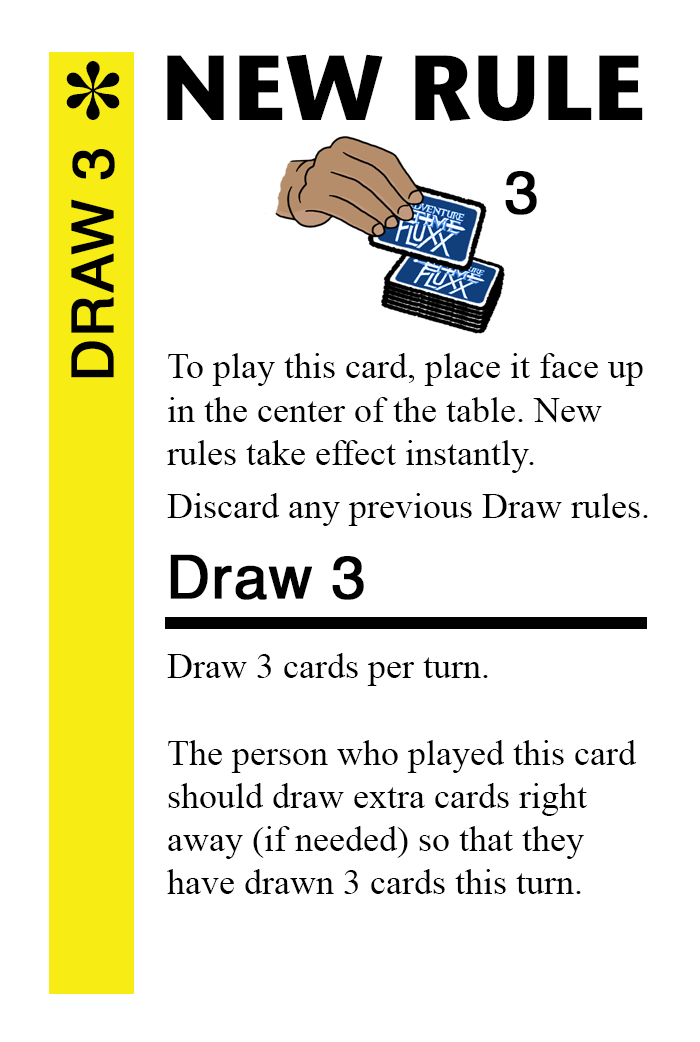
<style>
.page{position:relative;width:700px;height:1042px;background:#ffffff}
.page>*{position:absolute;margin:0}
.t1{font:92px "StoneSansITC-Bold";color:#000000}
.t2{font:82px "MS-Gothic";color:#000000}
.t3{font:58px "Helvetica";color:#000000;font-weight:bold}
.t4{font:60px "Helvetica";color:#000000;font-weight:bold}
.t5{font:36px "TimesNewRomanPSMT";color:#000000}
</style>
<div class="page">
<p class="t1" style="left:167px;top:54px;width:476px;height:67px">NEW RULE</p>
<p class="t2" style="left:66px;top:61px;width:54px;height:59px">✽</p>
<p class="t3" style="left:71px;top:149px;width:44px;height:229px;rotate:-90deg">DRAW 3</p>
<p class="t4" style="left:505px;top:171px;width:32px;height:44px">3</p>
<p class="t5" style="left:167px;top:353px;width:476px;height:120px">To play this card, place it face up<br>in the center of the table. New <br>rules take effect instantly.</p>
<p class="t5" style="left:167px;top:493px;width:481px;height:33px">Discard any previous Draw rules.</p>
<p class="t4" style="left:170px;top:554px;width:194px;height:46px">Draw 3</p>
<p class="t5" style="left:167px;top:653px;width:470px;height:241px">Draw 3 cards per turn.<br><br>The person who played this card<br>should draw extra cards right<br>away (if needed) so that they<br>have drawn 3 cards this turn.</p>
</div>
